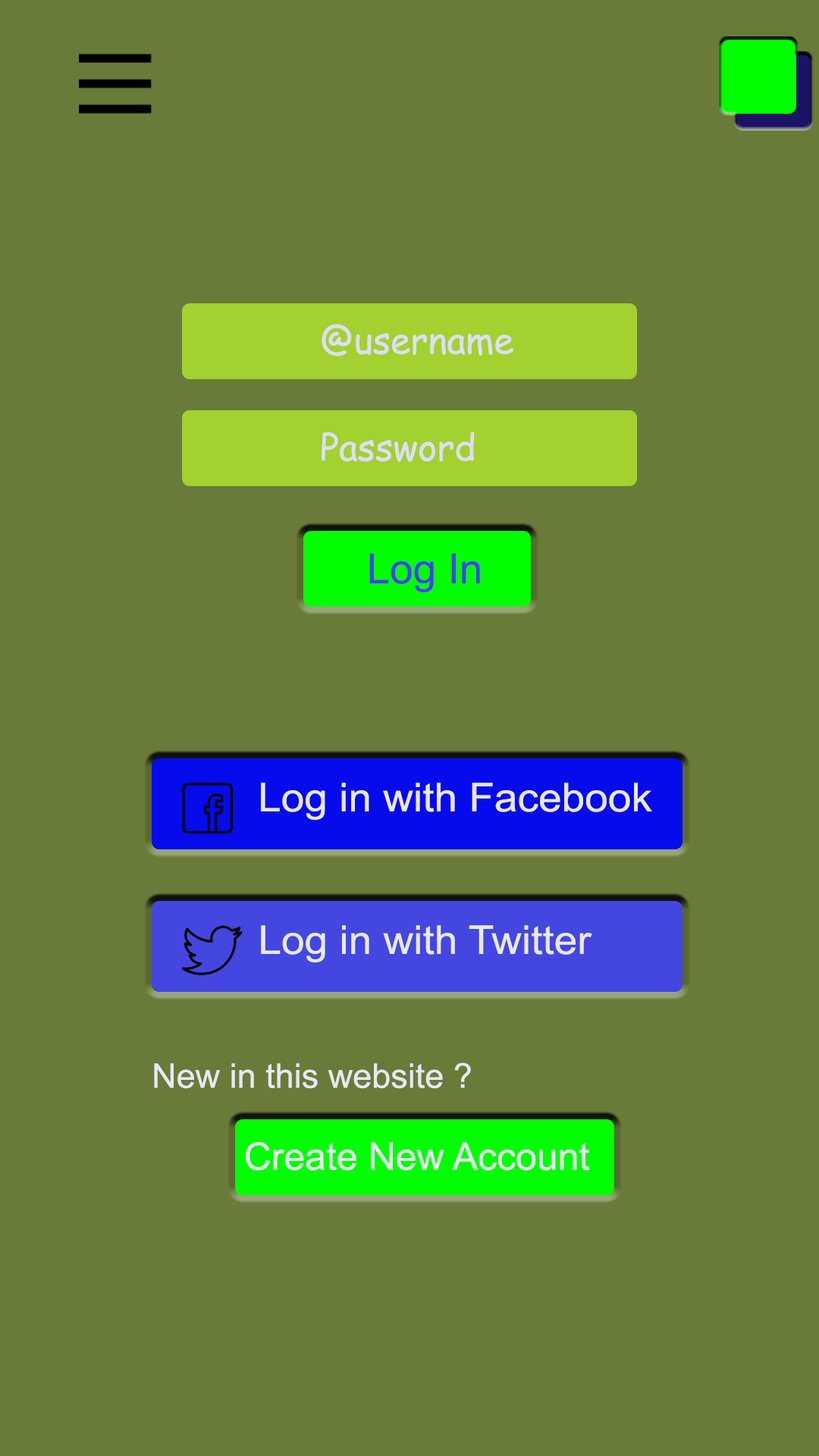
<style>
.page{position:relative;width:819px;height:1456px;background:#687b39}
.page>*{position:absolute;margin:0}
.t1{font:36.4px "ComicSansMS";color:#dddef3}
.t2{font:41.7px "ArialMT";color:#4145e3}
.t3{font:39.7px "ArialMT";color:#e8e8f1;scale:1.05 1}
.t4{font:34.1px "ArialMT";color:#e8e8f1}
.t5{font:37.9px "ArialMT";color:#e8e8f1}
</style>
<div class="page">
<p class="t1" style="left:322px;top:324px;width:191px;height:32px">@username</p>
<p class="t1" style="left:322px;top:431px;width:153px;height:31px">Password</p>
<p class="t2" style="left:369px;top:554px;width:111px;height:38px">Log In</p>
<p class="t3" style="left:261px;top:783px;width:391px;height:38px">Log in with Facebook</p>
<p class="t3" style="left:261px;top:925px;width:331px;height:38px">Log in with Twitter</p>
<p class="t4" style="left:154px;top:1062px;width:317px;height:27px">New in this website ?</p>
<p class="t5" style="left:246px;top:1142px;width:344px;height:29px">Create New Account</p>
</div>
